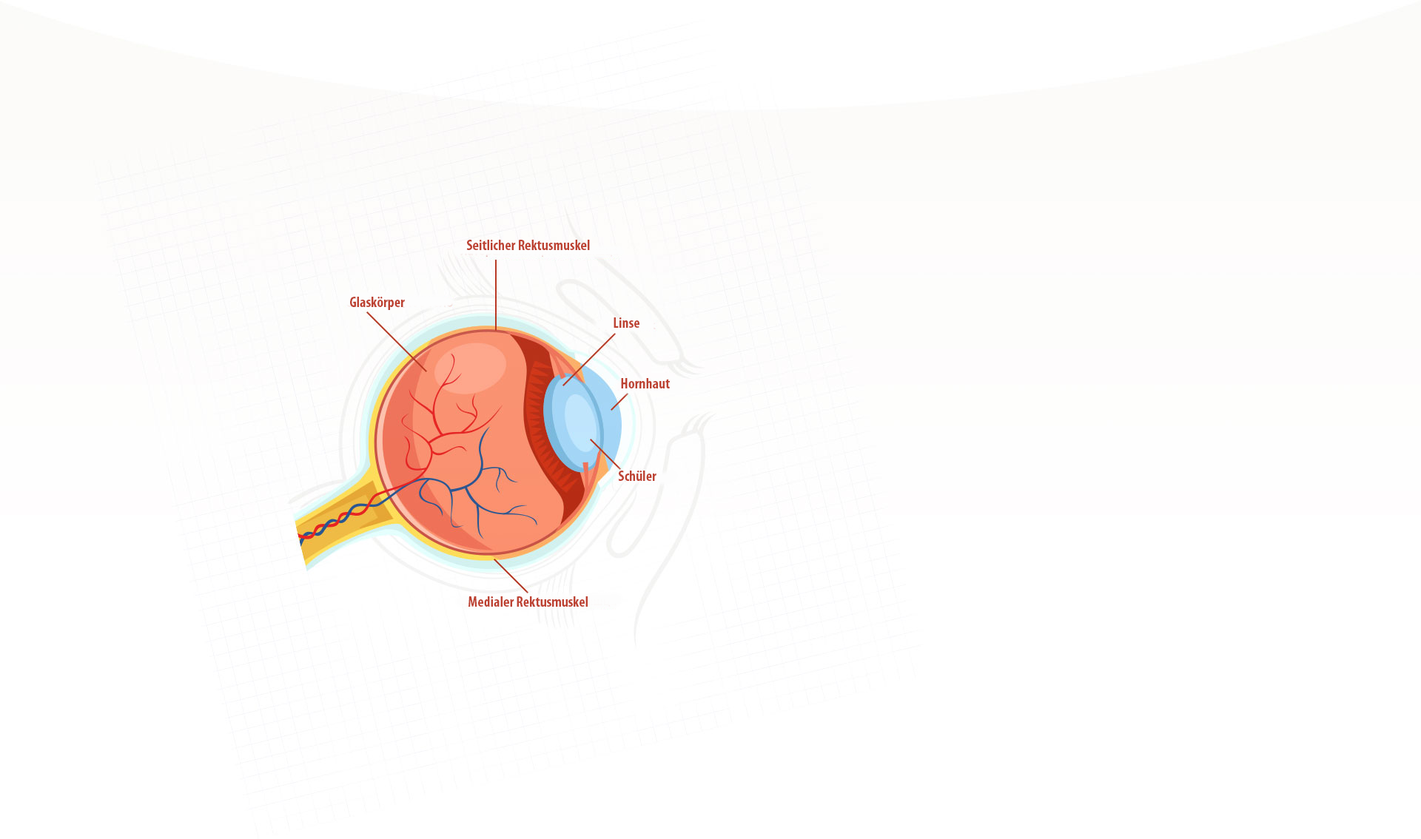
<style>
.page{position:relative;width:1421px;height:839px;background:#ffffff}
.page>*{position:absolute;margin:0}
.t1{font:14.8px "MyriadPro-BoldCond";color:#bd4232}
</style>
<div class="page">
<p class="t1" style="left:466px;top:240px;width:124px;height:10px">Seitlicher Rektusmuskel</p>
<p class="t1" style="left:350px;top:297px;width:55px;height:13px">Glaskörper</p>
<p class="t1" style="left:613px;top:317px;width:26px;height:11px">Linse</p>
<p class="t1" style="left:621px;top:378px;width:49px;height:11px">Hornhaut</p>
<p class="t1" style="left:618px;top:471px;width:38px;height:10px">Schüler</p>
<p class="t1" style="left:468px;top:596px;width:120px;height:11px">Medialer Rektusmuskel</p>
</div>
